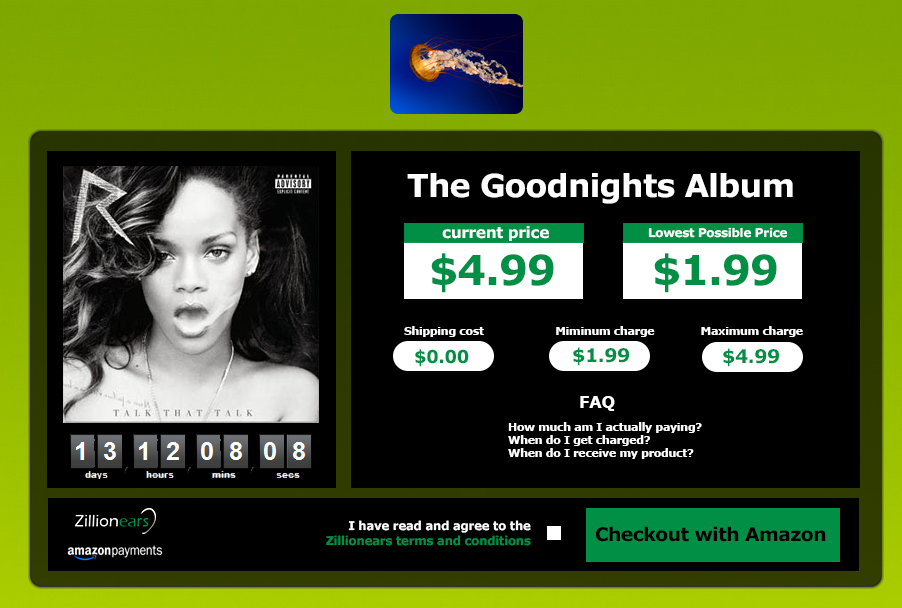
<style>
.page{position:relative;width:902px;height:608px;background:#000000}
.page>*{position:absolute;margin:0}
.t1{font:31.7px "Verdana-Bold";letter-spacing:-0.025em;color:#fefefe}
.t2{font:15.4px "Verdana-Bold";letter-spacing:-0.025em;color:#ffffff}
.t3{font:12px "Verdana-Bold";letter-spacing:-0.025em;color:#ffffff}
.t4{font:41.1px "Verdana-Bold";letter-spacing:-0.025em;color:#018f46}
.t5{font:11px "Verdana-Bold";letter-spacing:-0.025em;color:#ffffff}
.t6{font:18px "Verdana-Bold";letter-spacing:-0.025em;color:#018f46}
.t7{font:18.9px "Verdana-Bold";letter-spacing:-0.025em;color:#018f46}
.t8{font:17.1px "Verdana-Bold";letter-spacing:-0.025em;color:#ffffff;scale:0.95 1}
.t9{font:12px "Verdana-Bold";letter-spacing:-0.025em;color:#018f46}
.t10{font:18.9px "Verdana-Bold";letter-spacing:-0.025em;color:#000000}
</style>
<div class="page">
<p class="t1" style="left:407px;top:173px;width:386px;height:31px">The Goodnights Album</p>
<p class="t2" style="left:442px;top:226px;width:107px;height:15px">current price</p>
<p class="t3" style="left:648px;top:227px;width:140px;height:11px">Lowest Possible Price</p>
<p class="t4" style="left:431px;top:253px;width:123px;height:40px">$4.99</p>
<p class="t4" style="left:654px;top:253px;width:123px;height:40px">$1.99</p>
<p class="t5" style="left:404px;top:326px;width:80px;height:11px">Shipping cost</p>
<p class="t5" style="left:556px;top:326px;width:99px;height:11px">Miminum charge</p>
<p class="t5" style="left:701px;top:326px;width:102px;height:11px">Maximum charge</p>
<p class="t6" style="left:415px;top:349px;width:54px;height:18px">$0.00</p>
<p class="t7" style="left:573px;top:347px;width:56px;height:19px">$1.99</p>
<p class="t7" style="left:723px;top:348px;width:56px;height:19px">$4.99</p>
<p class="t8" style="left:580px;top:396px;width:35px;height:15px">FAQ</p>
<p class="t5" style="left:508px;top:422px;width:194px;height:37px">How much am I actually paying?<br>When do I get charged?<br>When do I receive my product?</p>
<p class="t9" style="left:326px;top:520px;width:205px;height:26px;text-align:right"><span class="t3">I have read and agree to the<br></span>Zillionears terms and conditions</p>
<p class="t10" style="left:596px;top:526px;width:230px;height:16px">Checkout with Amazon</p>
</div>
